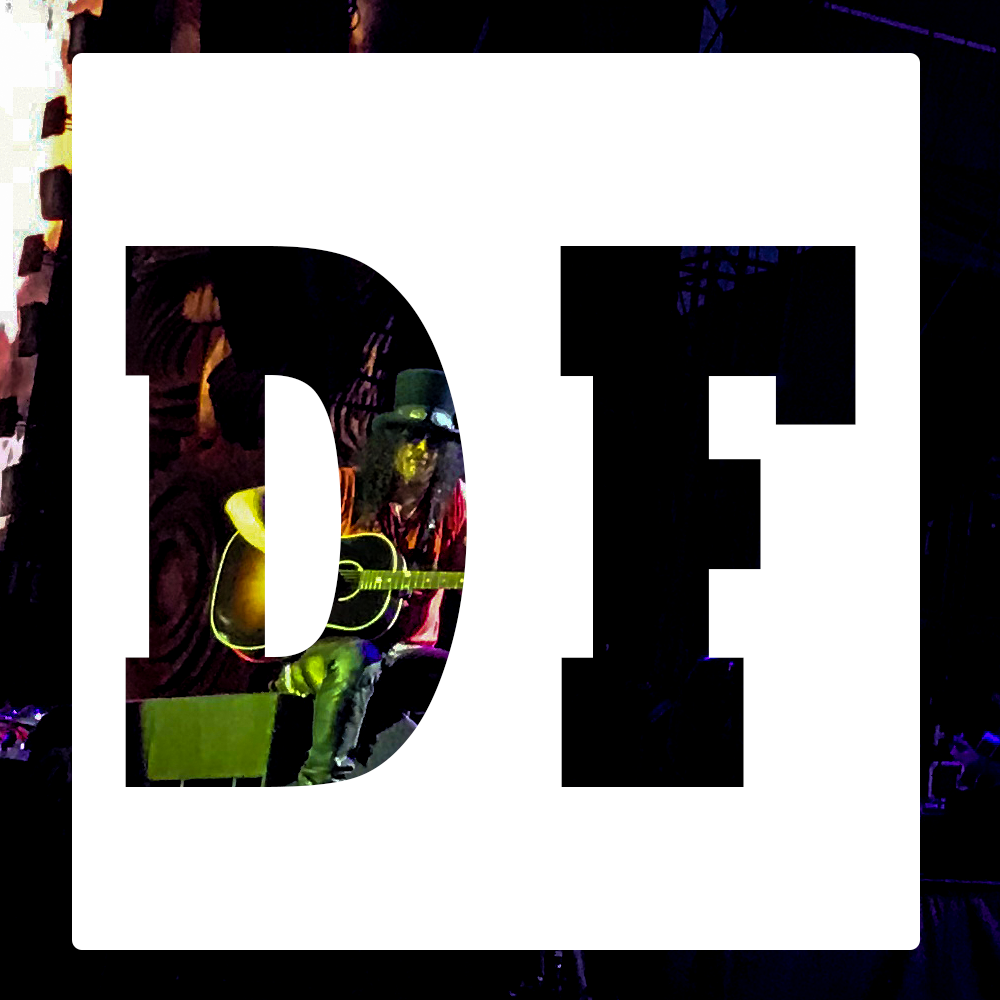
<style>
.page{position:relative;width:1000px;height:1000px;background:#ffffff}
.page>*{position:absolute;margin:0}
.t1{font:796.8px "Rockwell-ExtraBold";letter-spacing:0.14em;color:#000000;scale:0.55 1}
</style>
<div class="page">
<p class="t1" style="left:125px;top:246px;width:731px;height:541px">DF</p>
</div>
